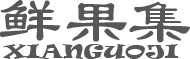
<style>
.page{position:relative;width:190px;height:59px;background:#ffffff}
.page>*{position:absolute;margin:0}
.t1{font:64px "LiSu";color:#575757}
.t2{font:18.3px "Ravie";color:#575757;scale:1.38 1}
</style>
<div class="page">
<p class="t1" style="left:0px;top:0px;width:61px;height:41px">鲜</p>
<p class="t1" style="left:66px;top:3px;width:61px;height:39px">果</p>
<p class="t1" style="left:129px;top:1px;width:61px;height:42px">集</p>
<p class="t2" style="left:3px;top:44px;width:176px;height:15px">XIANGUOJI</p>
</div>
